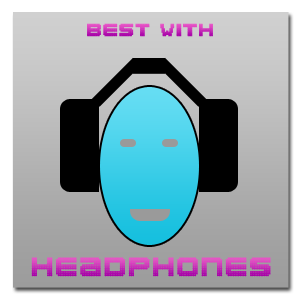
<style>
.page{position:relative;width:300px;height:300px}
.page>*{position:absolute;margin:0}
.t1{font:20px "Clubland";font-weight:bold}
.t2{font:30px "Clubland";font-weight:bold}
</style>
<div class="page">
<p class="t1" style="left:87px;top:23px;width:126px;height:14px">Best with</p>
<p class="t2" style="left:31px;top:257px;width:240px;height:20px">Headphones</p>
</div>
